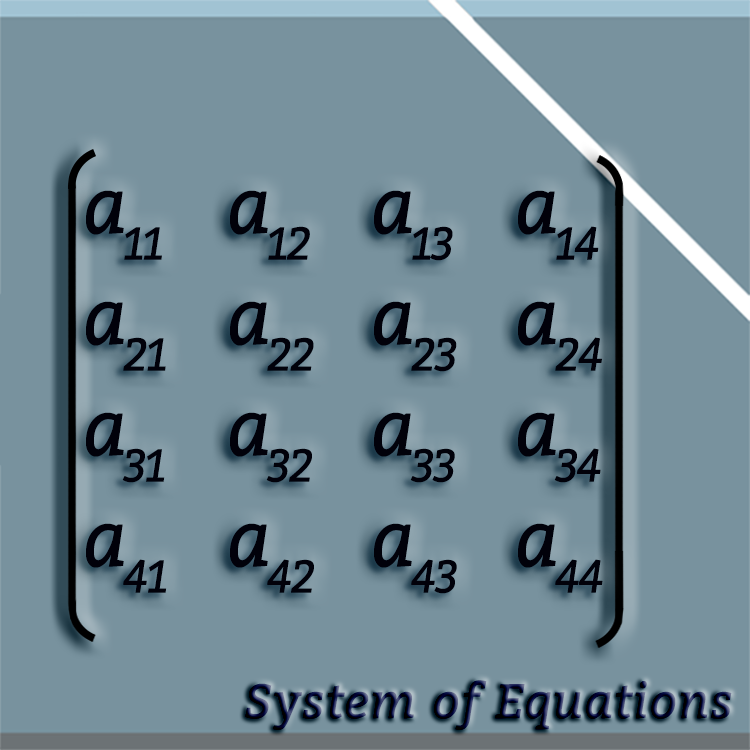
<style>
.page{position:relative;width:750px;height:750px;background:#78929e}
.page>*{position:absolute;margin:0}
.t1{font:78.5px/111px "Bitter-Italic";letter-spacing:-0.06em;color:#01010a;font-weight:bold;scale:0.93 1}
.t2{font:48px "Bitter-Italic";font-weight:bold}
</style>
<div class="page">
<p class="t1" style="left:86px;top:190px;width:517px;height:404px">a11  a12  a13  a14<br>a21  a22  a23  a24<br>a31  a32  a33  a34<br>a41  a42  a43  a44</p>
<p class="t2" style="left:245px;top:680px;width:487px;height:50px">System of Equations</p>
</div>
